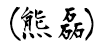
<style>
.page{position:relative;width:103px;height:47px;background:#ffffff}
.page>*{position:absolute;margin:0}
.t1{font:41.1px "AoyagiKouzanFont2OTF";color:#000000}
</style>
<div class="page">
<p class="t1" style="left:10px;top:6px;width:84px;height:35px">(   )</p>
<p class="t1" style="left:21px;top:6px;width:31px;height:34px">熊</p>
<p class="t1" style="left:58px;top:7px;width:27px;height:33px">磊</p>
</div>
